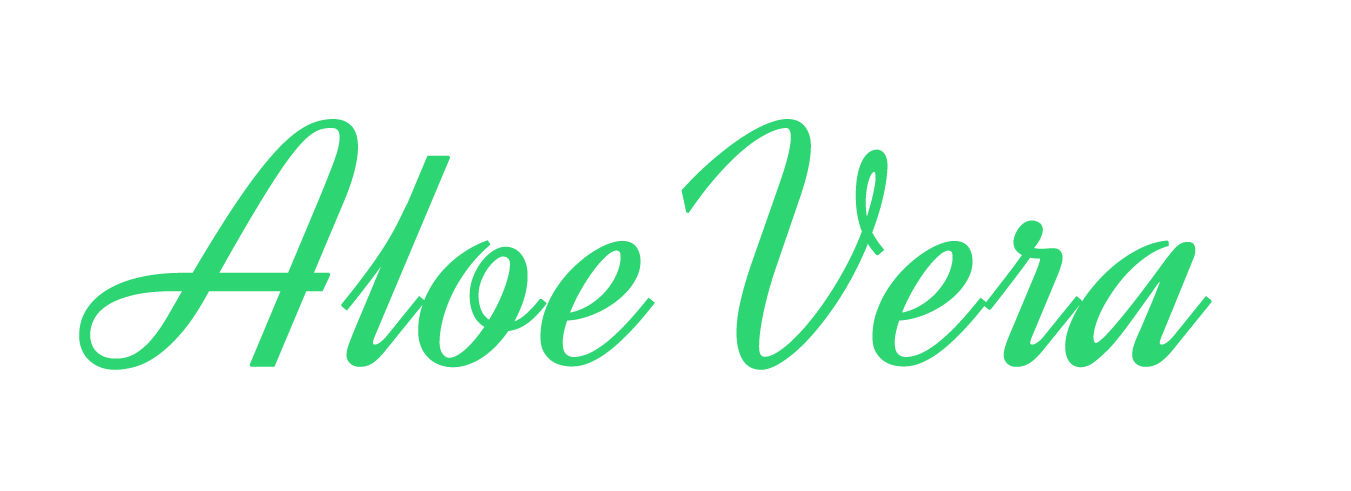
<style>
.page{position:relative;width:1351px;height:491px;background:#ffffff}
.page>*{position:absolute;margin:0}
.t1{font:350px "Dynalight-Regular";color:#2ed573;font-weight:bold}
</style>
<div class="page">
<p class="t1" style="left:79px;top:119px;width:1133px;height:251px">AloeVera</p>
</div>
